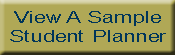
<style>
.page{position:relative;width:175px;height:55px;background:#b0a856}
.page>*{position:absolute;margin:0}
.t1{font:15.9px "ArialMT";color:#00355a;scale:1.39 1}
</style>
<div class="page">
<p class="t1" style="left:10px;top:11px;width:156px;height:31px;text-align:center">View A Sample<br>Student Planner</p>
<p class="t1" style="left:10px;top:11px;width:156px;height:31px;text-align:center">View A Sample<br>Student Planner</p>
</div>
